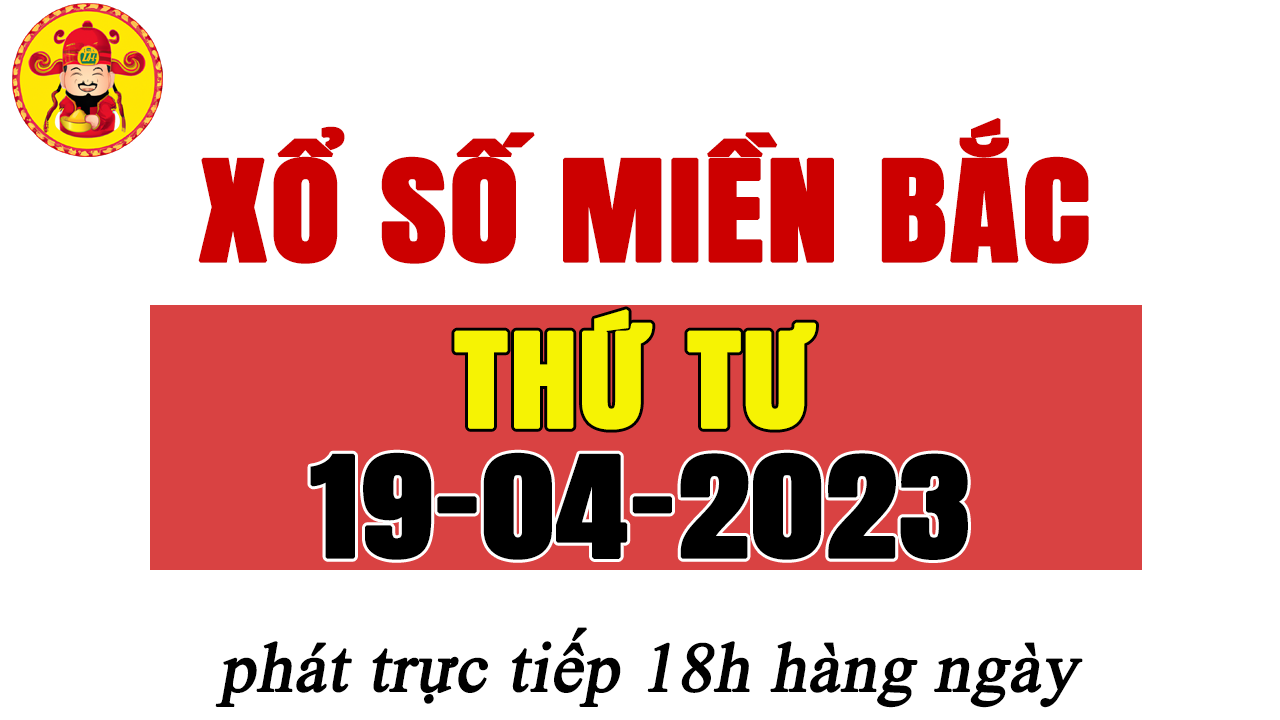
<style>
.page{position:relative;width:1280px;height:720px;background:#ffffff}
.page>*{position:absolute;margin:0}
.t1{font:118px "Anton-Regular";color:#cc0000;text-transform:uppercase;font-weight:bold;scale:1.2 1}
.t2{font:110px "Anton-Regular";color:#f6f303;text-transform:uppercase;font-weight:bold;scale:1.2 1}
.t3{font:118px "Anton-Regular";color:#000000;text-transform:uppercase;font-weight:bold;scale:1.2 1}
.t4{font:70px "TimesNewRomanPSMT";color:#000000;font-weight:bold;font-style:italic}
</style>
<div class="page">
<p class="t1" style="left:198px;top:117px;width:891px;height:147px">Xổ số miền bắc</p>
<p class="t2" style="left:454px;top:309px;width:362px;height:121px">thứ tư</p>
<p class="t3" style="left:310px;top:452px;width:658px;height:108px">19-04-2023</p>
<p class="t4" style="left:215px;top:627px;width:868px;height:81px">phát trực tiếp 18h hàng ngày</p>
</div>
